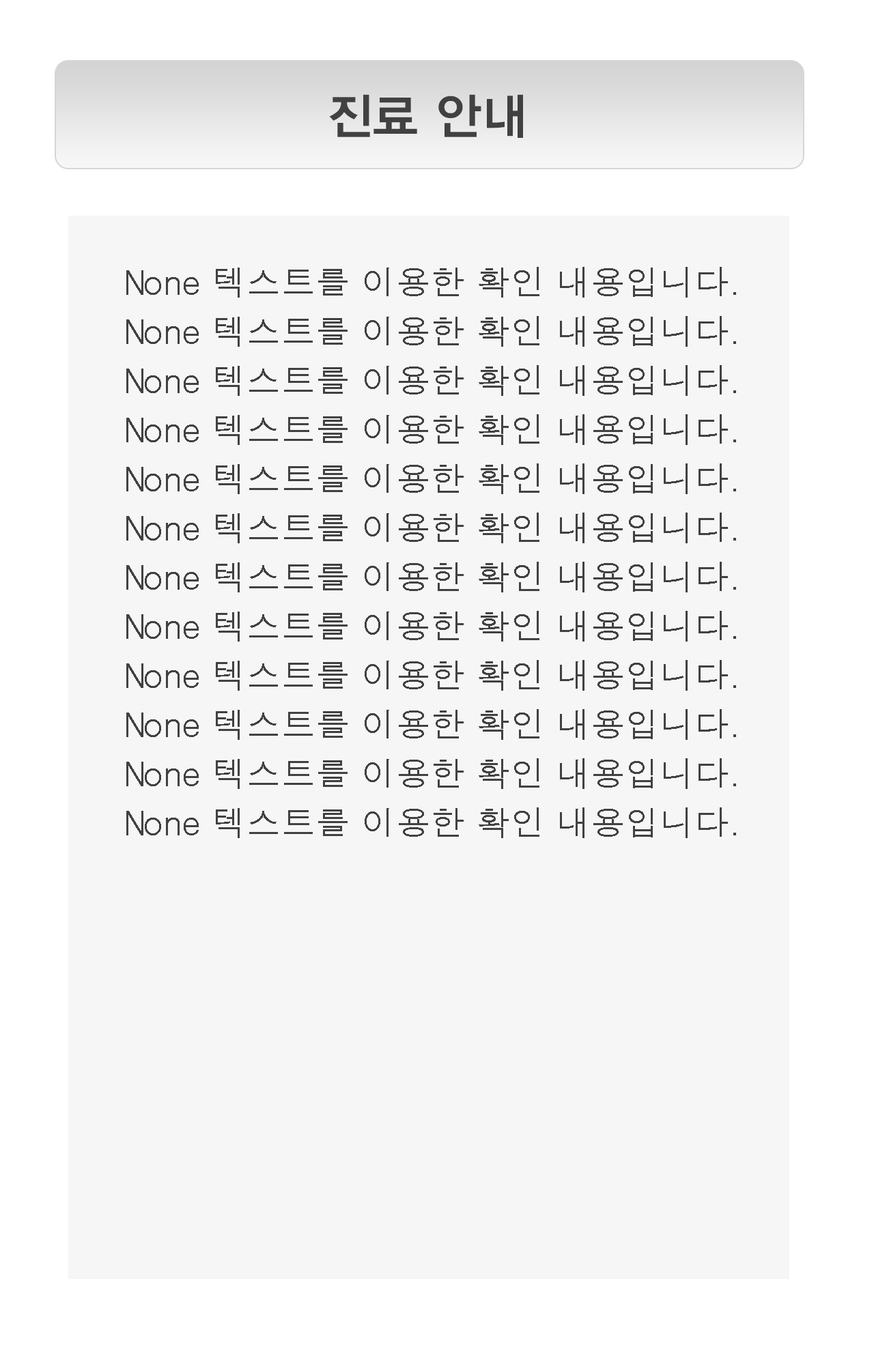
<style>
.page{position:relative;width:874px;height:1365px;background:#f6f6f6}
.page>*{position:absolute;margin:0}
.t1{font:49.1px "YDIYGO340";letter-spacing:0.01em;color:#414141}
.t2{font:34.1px/49.1px "Dotum";letter-spacing:0.01em;color:#414141}
</style>
<div class="page">
<p class="t1" style="left:329px;top:94px;width:194px;height:44px">진료 안내</p>
<p class="t2" style="left:126px;top:267px;width:610px;height:571px">None 텍스트를 이용한 확인 내용입니다.<br>None 텍스트를 이용한 확인 내용입니다.<br>None 텍스트를 이용한 확인 내용입니다.<br>None 텍스트를 이용한 확인 내용입니다.<br>None 텍스트를 이용한 확인 내용입니다.<br>None 텍스트를 이용한 확인 내용입니다.<br>None 텍스트를 이용한 확인 내용입니다.<br>None 텍스트를 이용한 확인 내용입니다.<br>None 텍스트를 이용한 확인 내용입니다.<br>None 텍스트를 이용한 확인 내용입니다.<br>None 텍스트를 이용한 확인 내용입니다.<br>None 텍스트를 이용한 확인 내용입니다.</p>
</div>
